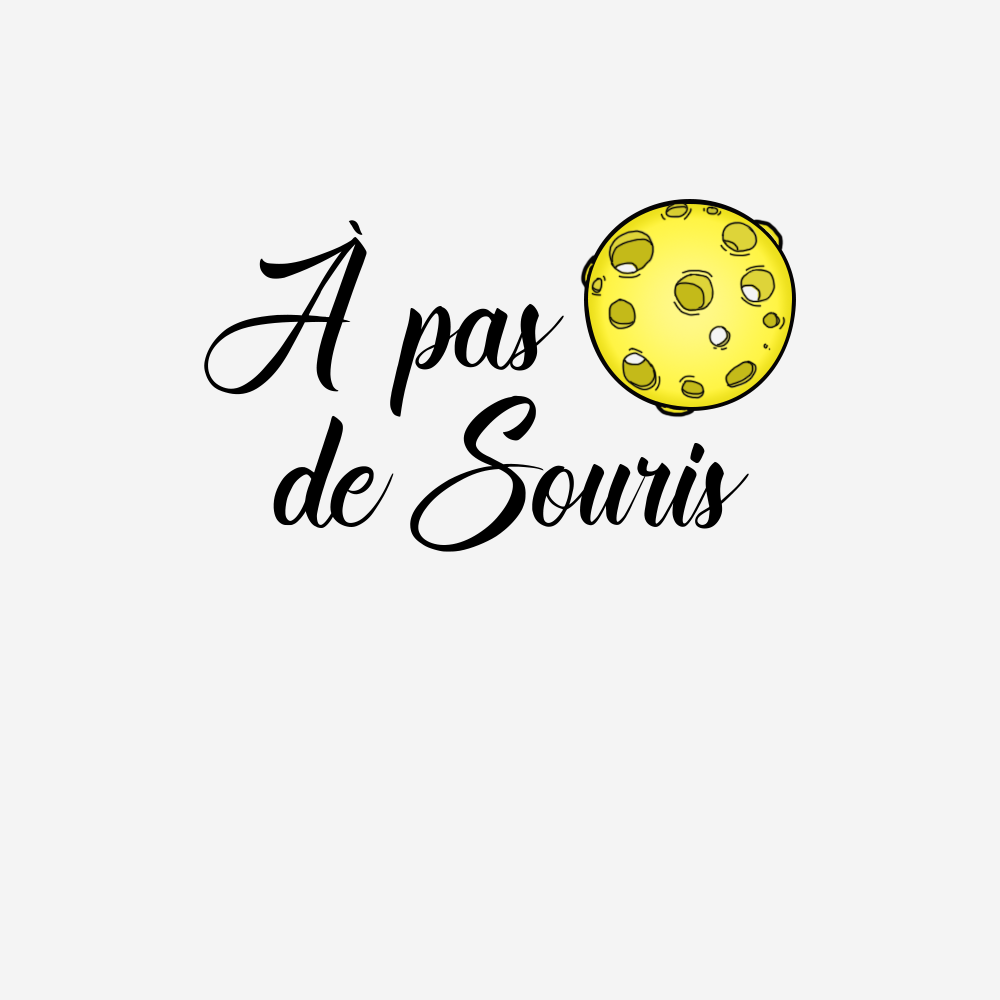
<style>
.page{position:relative;width:1000px;height:1000px;background:#f4f4f4}
.page>*{position:absolute;margin:0}
.t1{font:200px/158.3px "WhiteChick";color:#000000}
</style>
<div class="page">
<p class="t1" style="left:204px;top:220px;width:545px;height:332px">À  pas <br>   de Souris</p>
</div>
